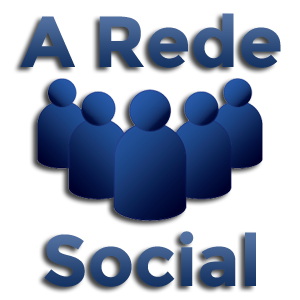
<style>
.page{position:relative;width:300px;height:300px;background:#ffffff}
.page>*{position:absolute;margin:0}
.t1{font:72px "Montserrat-Bold";color:#2f4d7c}
.t2{font:72px "Montserrat-Bold";color:#2e4c7b}
</style>
<div class="page">
<p class="t1" style="left:20px;top:13px;width:261px;height:55px">A Rede</p>
<p class="t2" style="left:44px;top:231px;width:212px;height:56px">Social</p>
</div>
